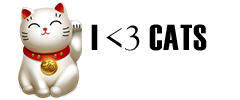
<style>
.page{position:relative;width:240px;height:100px;background:#ffffff}
.page>*{position:absolute;margin:0}
.t1{font:36px "Haettenschweiler";letter-spacing:0.015em;color:#010000;text-transform:uppercase}
.t2{font:36px "GoudyOldStyleT-Regular";letter-spacing:0.015em;color:#010000;text-transform:uppercase}
</style>
<div class="page">
<p class="t1" style="left:91px;top:24px;width:116px;height:27px">I <span class="t2">&lt;3</span> Cats</p>
</div>
